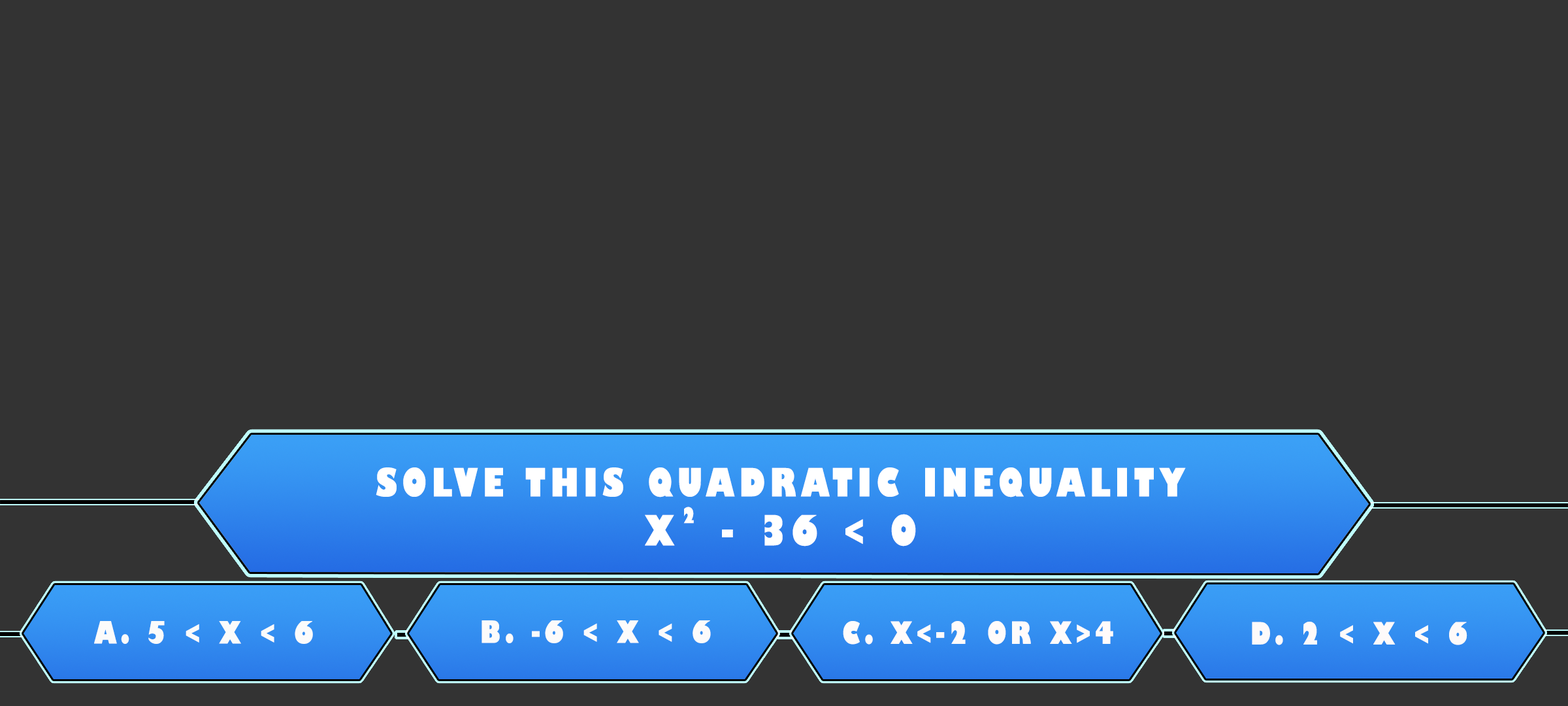
<style>
.page{position:relative;width:1568px;height:706px;background:#333333}
.page>*{position:absolute;margin:0}
.t1{font:38.1px/49px "GillSans-UltraBoldCondensed";letter-spacing:0.115em;color:#ffffff;text-transform:uppercase;scale:1.12 1}
.t2{font:40.8px/49px "GillSans-UltraBoldCondensed";letter-spacing:0.115em;color:#ffffff;text-transform:uppercase;scale:1.12 1}
.t3{font:21.1px "GillSans-UltraBoldCondensed";letter-spacing:0.115em;color:#ffffff;text-transform:uppercase;scale:1.11 1}
.t4{font:29.9px "GillSans-UltraBoldCondensed";letter-spacing:0.115em;color:#fbfbfb;text-transform:uppercase;scale:1.12 1}
.t5{font:29.9px "GillSans-UltraBoldCondensed";letter-spacing:0.115em;color:#fcfbfb;text-transform:uppercase;scale:1.12 1}
.t6{font:29.9px "GillSans-UltraBoldCondensed";letter-spacing:0.115em;color:#fffbfb;text-transform:uppercase;scale:1.12 1}
.t7{font:29.9px "GillSans-UltraBoldCondensed";letter-spacing:0.115em;color:#fefafa;text-transform:uppercase;scale:1.12 1}
</style>
<div class="page">
<p class="t1" style="left:376px;top:467px;width:810px;height:79px;text-align:center">solve this quadratic inequality<br><span class="t2">x  - 36 &lt; 0</span></p>
<p class="t3" style="left:683px;top:506px;width:11px;height:17px">2</p>
<p class="t4" style="left:94px;top:621px;width:219px;height:23px">a. 5 &lt; x &lt; 6</p>
<p class="t5" style="left:482px;top:620px;width:229px;height:23px">b. -6 &lt; x &lt; 6</p>
<p class="t6" style="left:843px;top:621px;width:270px;height:23px">c. x&lt;-2 or x&gt;4</p>
<p class="t7" style="left:1252px;top:621px;width:215px;height:24px">d. 2 &lt; x &lt; 6</p>
</div>
